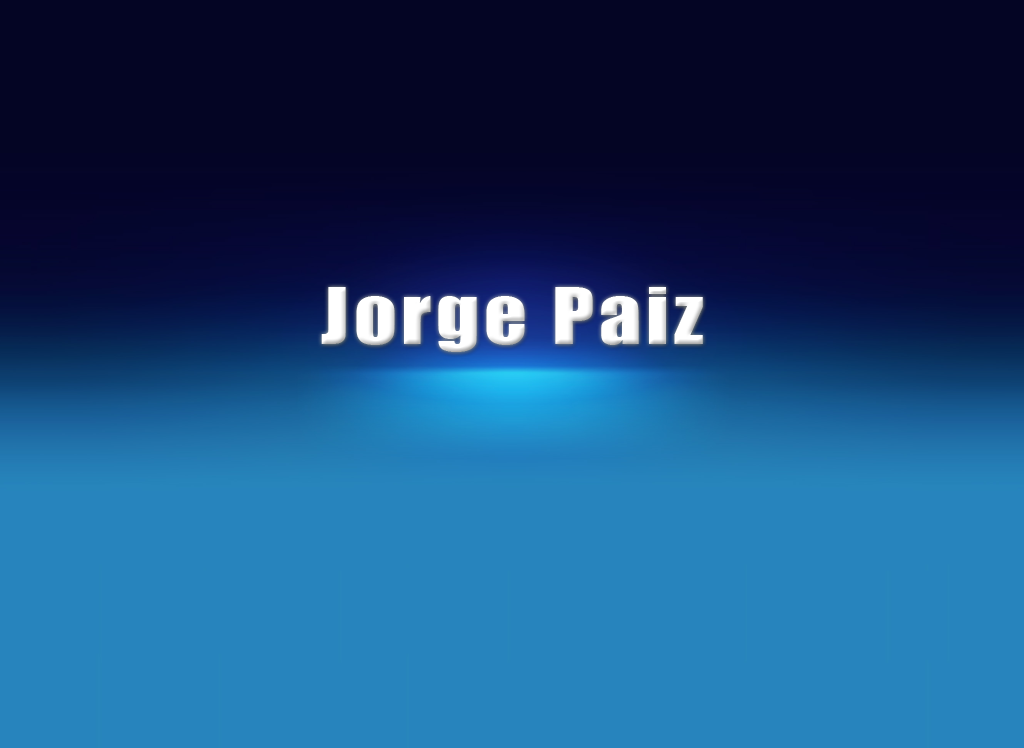
<style>
.page{position:relative;width:1024px;height:748px;background:#2784bd}
.page>*{position:absolute;margin:0}
.t1{font:72px "Impact";letter-spacing:0.06em;color:#ffffff;scale:1.16 1}
</style>
<div class="page">
<p class="t1" style="left:321px;top:287px;width:382px;height:65px">Jorge Paiz</p>
</div>
